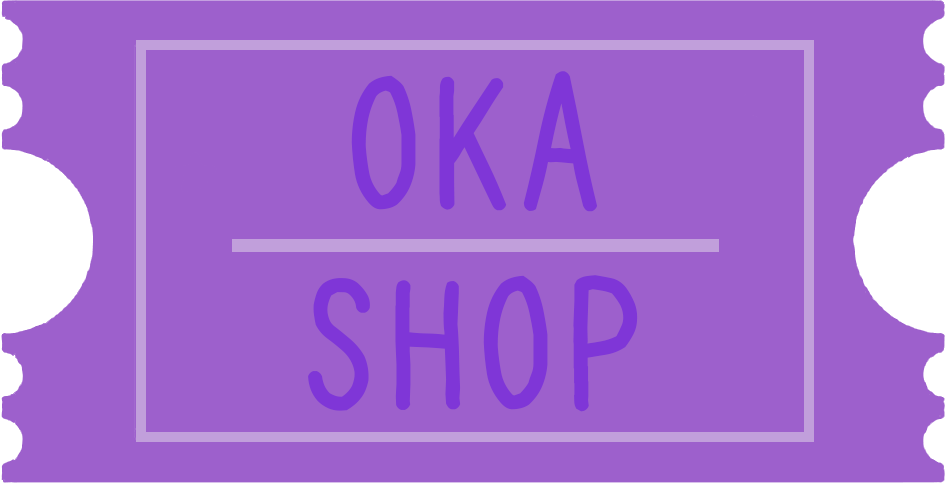
<style>
.page{position:relative;width:945px;height:483px;background:#9d60cc}
.page>*{position:absolute;margin:0}
.t1{font:166.7px "azukifontP";color:#7f36d7;font-weight:bold}
</style>
<div class="page">
<p class="t1" style="left:308px;top:71px;width:330px;height:341px;text-align:center">OKA<br>SHOP</p>
</div>
